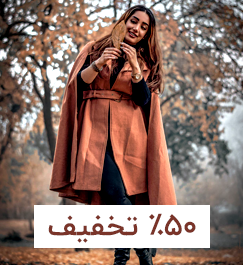
<style>
.page{position:relative;width:243px;height:265px}
.page>*{position:absolute;margin:0}
.t1{font:30px "IRANYekan-Bold";color:#7a3429}
</style>
<div class="page">
<p class="t1" style="left:48px;top:213px;width:148px;height:30px">50% تخفیف</p>
</div>
